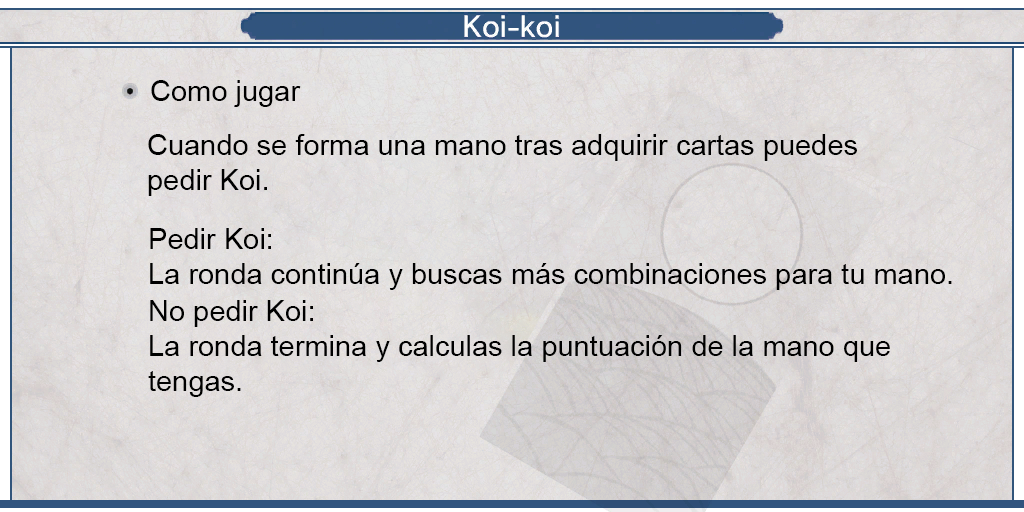
<style>
.page{position:relative;width:1024px;height:512px}
.page>*{position:absolute;margin:0}
.t1{font:29px "ArialMT";color:#000000}
</style>
<div class="page">
<p class="t1" style="left:151px;top:80px;width:150px;height:27px">Como jugar</p>
<p class="t1" style="left:148px;top:134px;width:709px;height:62px;text-align:justify">Cuando se forma una mano tras adquirir cartas puedes<br>pedir Koi.</p>
<p class="t1" style="left:148px;top:228px;width:804px;height:169px;text-align:justify">Pedir Koi:<br>La ronda continúa y buscas más combinaciones para tu mano.<br><br>No pedir Koi:<br>La ronda termina y calculas la puntuación de la mano que<br>tengas.</p>
</div>
